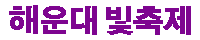
<style>
.page{position:relative;width:200px;height:40px;background:#ffffff}
.page>*{position:absolute;margin:0}
.t1{font:30px "AdobeGothicStd-Bold";letter-spacing:-0.05em;color:#7e0590;font-weight:bold}
</style>
<div class="page">
<p class="t1" style="left:9px;top:5px;width:182px;height:30px">해운대 빛축제</p>
</div>
